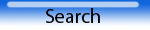
<style>
.page{position:relative;width:150px;height:30px}
.page>*{position:absolute;margin:0}
.t1{font:20px "MyriadPro-Regular";color:#010101}
</style>
<div class="page">
<p class="t1" style="left:46px;top:8px;width:54px;height:15px">Search</p>
</div>
